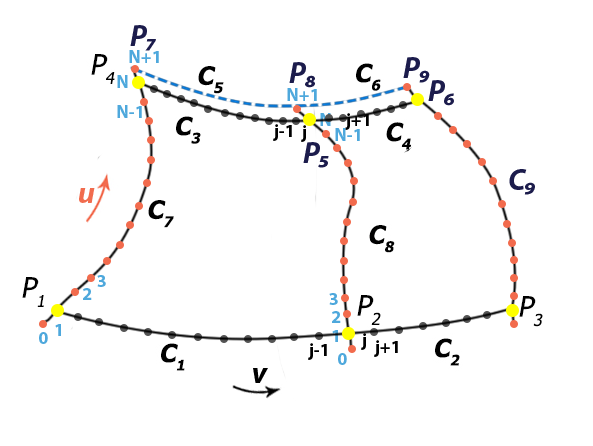
<style>
.page{position:relative;width:593px;height:446px;background:#ffffff}
.page>*{position:absolute;margin:0}
.t1{font:30px "MyriadPro-BoldIt";color:#1c1c4c}
.t2{font:18px "MyriadPro-Bold";color:#4ea8dc}
.t3{font:18px "MyriadPro-Bold"}
.t4{font:18px "MyriadPro-Bold";color:#000000}
.t5{font:30px "MyriadPro-BoldIt";color:#f16c4d}
.t6{font:30px "MyriadPro-BoldIt";color:#000000}
</style>
<div class="page">
<p class="t1" style="left:130px;top:25px;width:26px;height:26px">P7</p>
<p class="t2" style="left:129px;top:50px;width:30px;height:13px">N+1</p>
<p class="t1" style="left:289px;top:62px;width:26px;height:26px">P8</p>
<p class="t1" style="left:403px;top:57px;width:27px;height:26px">P9</p>
<p class="t2" style="left:117px;top:75px;width:11px;height:13px">N</p>
<p class="t2" style="left:287px;top:88px;width:30px;height:13px">N+1</p>
<p class="t1" style="left:428px;top:80px;width:26px;height:26px">P6</p>
<p class="t2" style="left:117px;top:105px;width:25px;height:13px">N-1</p>
<p class="t3" style="left:320px;top:113px;width:11px;height:13px">N</p>
<p class="t4" style="left:345px;top:113px;width:24px;height:17px">j+1</p>
<p class="t4" style="left:273px;top:124px;width:19px;height:17px">j-1</p>
<p class="t4" style="left:301px;top:125px;width:5px;height:17px">j</p>
<p class="t2" style="left:335px;top:128px;width:25px;height:13px">N-1</p>
<p class="t1" style="left:303px;top:142px;width:26px;height:26px">P5</p>
<p class="t1" style="left:509px;top:169px;width:26px;height:26px">C9</p>
<p class="t5" style="left:79px;top:188px;width:16px;height:15px">u</p>
<p class="t2" style="left:97px;top:275px;width:9px;height:12px">3</p>
<p class="t2" style="left:83px;top:288px;width:9px;height:12px">2</p>
<p class="t2" style="left:329px;top:293px;width:9px;height:12px">3</p>
<p class="t2" style="left:332px;top:311px;width:9px;height:12px">2</p>
<p class="t2" style="left:55px;top:324px;width:6px;height:12px">1</p>
<p class="t2" style="left:39px;top:332px;width:9px;height:12px">0</p>
<p class="t2" style="left:332px;top:330px;width:6px;height:12px">1</p>
<p class="t4" style="left:361px;top:333px;width:5px;height:17px">j</p>
<p class="t4" style="left:374px;top:340px;width:24px;height:17px">j+1</p>
<p class="t4" style="left:308px;top:343px;width:19px;height:17px">j-1</p>
<p class="t2" style="left:338px;top:353px;width:9px;height:12px">0</p>
<p class="t6" style="left:253px;top:368px;width:15px;height:15px">v</p>
</div>
